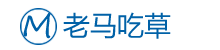
<style>
.page{position:relative;width:220px;height:50px;background:#ffffff}
.page>*{position:absolute;margin:0}
.t1{font:30.8px "SegoeScript";color:#0061a7}
.t2{font:27px "MicrosoftYaHei";color:#0061a7}
</style>
<div class="page">
<p class="t1" style="left:23px;top:12px;width:28px;height:27px">M</p>
<p class="t2" style="left:63px;top:12px;width:108px;height:27px">老马吃草</p>
</div>
